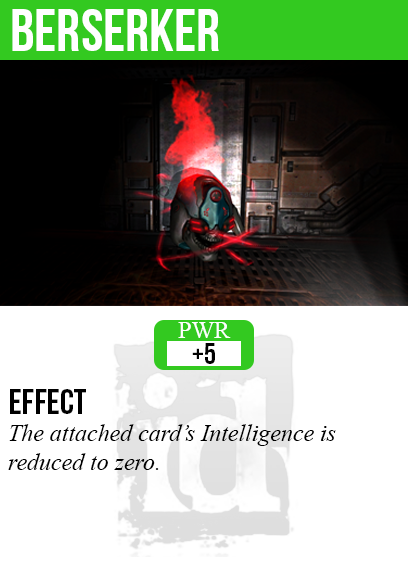
<style>
.page{position:relative;width:408px;height:585px;background:#ffffff}
.page>*{position:absolute;margin:0}
.t1{font:60px "BebasNeue";color:#ffffff}
.t2{font:24px "TimesNewRomanPSMT";color:#ffffff}
.t3{font:30px "BebasNeue";color:#000000}
.t4{font:35.9px "BebasNeue";color:#000000}
.t5{font:23.9px/89px "TimesNewRomanPS-ItalicMT";color:#000000}
.t6{font:23.9px "TimesNewRomanPS-ItalicMT";color:#000000}
</style>
<div class="page">
<p class="t1" style="left:12px;top:9px;width:207px;height:42px">berserker</p>
<p class="t2" style="left:178px;top:322px;width:53px;height:16px">PWR</p>
<p class="t3" style="left:192px;top:343px;width:23px;height:21px">+5</p>
<p class="t4" style="left:10px;top:389px;width:76px;height:25px">effect</p>
<p class="t5" style="left:8px;top:424px;width:328px;height:46px">The attached card’s Intelligence is<span class="t6"><br>reduced to zero.</span></p>
</div>
